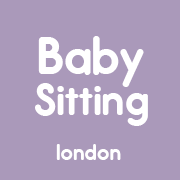
<style>
.page{position:relative;width:180px;height:180px;background:#aa99ba}
.page>*{position:absolute;margin:0}
.t1{font:58.3px "Report-Bold";color:#ffffff}
.t2{font:50px "Report-Bold";color:#ffffff}
.t3{font:25px "Report-Bold";color:#ffffff}
</style>
<div class="page">
<p class="t1" style="left:38px;top:36px;width:106px;height:51px">Baby</p>
<p class="t2" style="left:35px;top:83px;width:113px;height:43px">Sitting</p>
<p class="t3" style="left:56px;top:144px;width:65px;height:16px">london</p>
</div>
